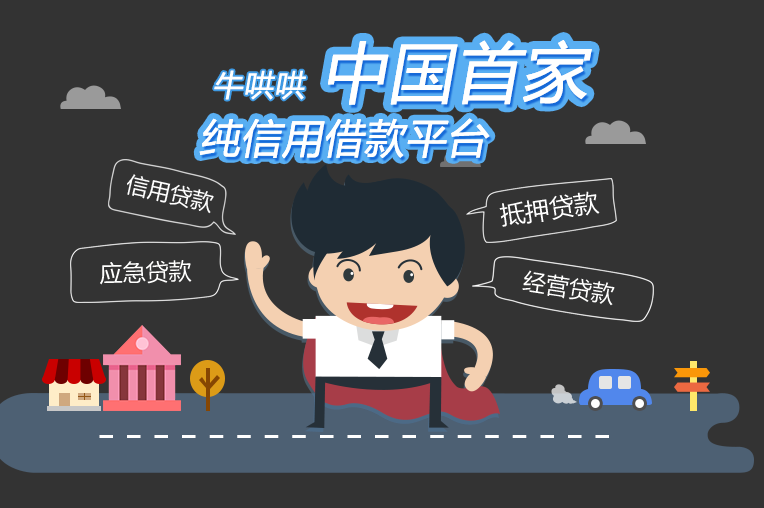
<style>
.page{position:relative;width:764px;height:508px;background:#333333}
.page>*{position:absolute;margin:0}
.t1{font:65px "MicrosoftYaHei";color:#fffffe;font-variant:small-caps;font-weight:bold;font-style:italic}
.t2{font:30px "MicrosoftYaHei";color:#fffffe;font-variant:small-caps;font-weight:bold;font-style:italic}
.t3{font:40px "MicrosoftYaHei";color:#fffffe;font-variant:small-caps;font-weight:bold;font-style:italic}
.t4{font:23px "MicrosoftYaHei";color:#fffffe}
</style>
<div class="page">
<p class="t1" style="left:328px;top:40px;width:264px;height:65px">中国首家</p>
<p class="t1" style="left:328px;top:40px;width:264px;height:65px">中国首家</p>
<p class="t2" style="left:214px;top:70px;width:92px;height:30px">牛哄哄</p>
<p class="t3" style="left:199px;top:118px;width:291px;height:41px">纯信用借款平台</p>
<p class="t3" style="left:199px;top:118px;width:291px;height:41px">纯信用借款平台</p>
<p class="t4" style="left:100px;top:260px;width:92px;height:25px;rotate:-2deg">应急贷款</p>
<p class="t4" style="left:522px;top:270px;width:93px;height:36px;rotate:9deg">经营贷款</p>
</div>
